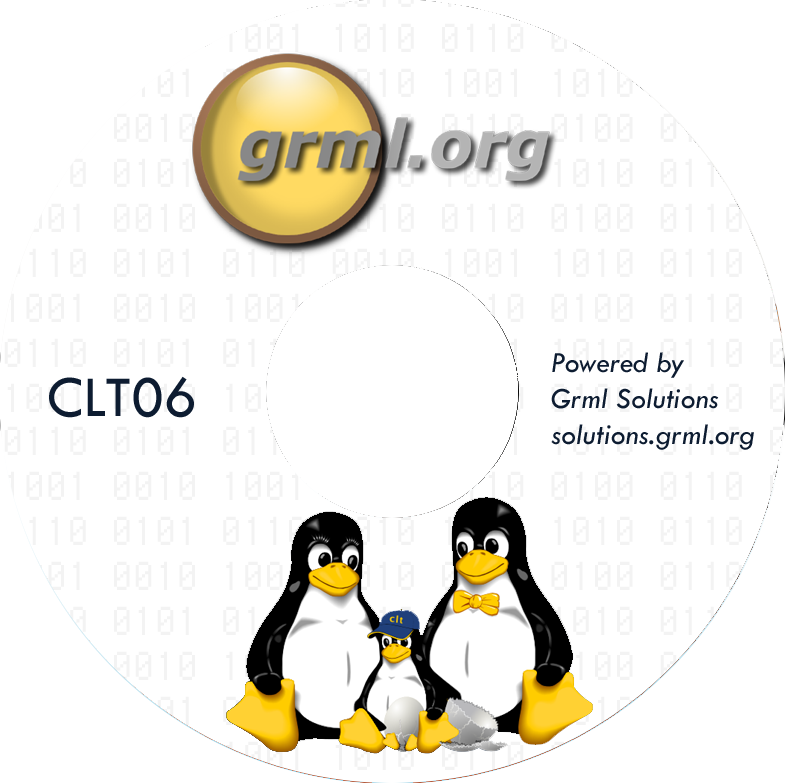
<style>
.page{position:relative;width:785px;height:783px;background:#ffffff}
.page>*{position:absolute;margin:0}
.t1{font:30px "TwCenMT-Italic";color:#0d1c31}
.t2{font:60px "TwCenMT-Regular";color:#0d1c31}
</style>
<div class="page">
<p class="t1" style="left:551px;top:352px;width:203px;height:98px">Powered by<br>Grml Solutions<br>solutions.grml.org</p>
<p class="t2" style="left:49px;top:376px;width:145px;height:42px">CLT06</p>
</div>
